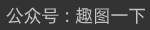
<style>
.page{position:relative;width:150px;height:30px;background:#333333}
.page>*{position:absolute;margin:0}
.t1{font:18px "AlibabaPuHuiTi-Regular";color:#c3c3c3}
</style>
<div class="page">
<p class="t1" style="left:6px;top:7px;width:139px;height:17px">公众号 : 趣图一下</p>
</div>
